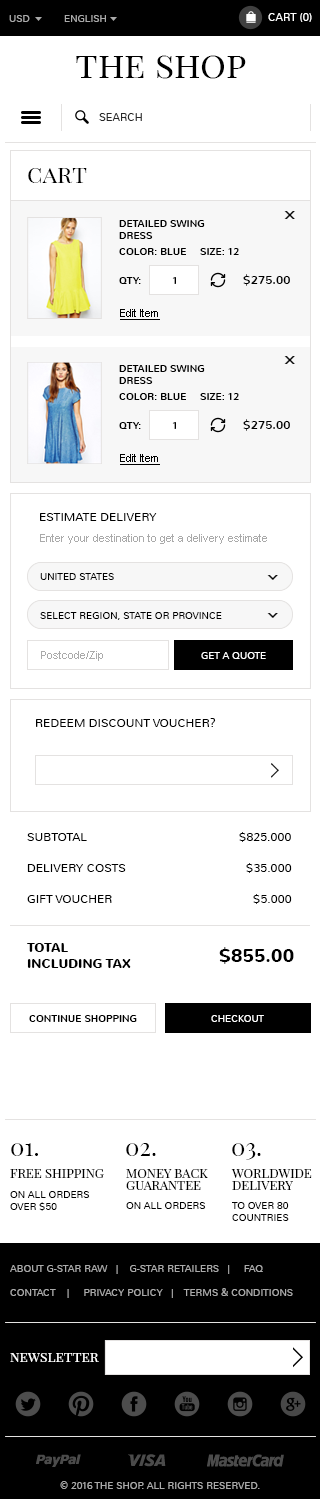
<style>
.page{position:relative;width:320px;height:1499px;background:#ffffff}
.page>*{position:absolute;margin:0}
.t1{font:10px "Nunito-Light";color:#aaaaaa;text-transform:uppercase}
.t2{font:11px "Nunito-Light";color:#ffffff;text-transform:uppercase}
.t3{font:36px "PlayfairDisplaySC-Regular";color:#000000}
.t4{font:11px "Nunito-Light";color:#282828;text-transform:uppercase}
.t5{font:24px "PlayfairDisplaySC-Regular";color:#000000}
.t6{font:10px/12px "Nunito-Regular";color:#000000;text-transform:uppercase}
.t7{font:10px "Nunito-Regular";color:#000000;text-transform:uppercase}
.t8{font:10px "Nunito-Regular";color:#000000}
.t9{font:12px "Nunito-Regular";color:#000000;text-transform:uppercase}
.t10{font:11px "ArialMT";color:#000000;text-decoration:underline}
.t11{font:12px "Nunito-Light";color:#000000;text-transform:uppercase}
.t12{font:11px "ArialMT";color:#aaaaaa}
.t13{font:10px "Nunito-Light";color:#000000;text-transform:uppercase}
.t14{font:10px "Nunito-Light";color:#ffffff;text-transform:uppercase}
.t15{font:13px "Nunito-Bold";color:#000000;text-transform:uppercase}
.t16{font:18px "Nunito-Bold";color:#000000;text-transform:uppercase}
.t17{font:13px "PlayfairDisplaySC-Regular";color:#000000;text-transform:uppercase}
.t18{font:13px/12px "PlayfairDisplaySC-Regular";color:#000000;text-transform:uppercase}
.t19{font:10px/24px "Nunito-Light";color:#aaaaaa;text-transform:uppercase}
.t20{font:14px "PlayfairDisplaySC-Regular";color:#ffffff}
</style>
<div class="page">
<p class="t1" style="left:9px;top:15px;width:21px;height:7px">usD</p>
<p class="t1" style="left:64px;top:15px;width:42px;height:7px">English</p>
<p class="t2" style="left:268px;top:13px;width:44px;height:9px">Cart (0)</p>
<p class="t3" style="left:76px;top:55px;width:170px;height:24px">the shop</p>
<p class="t4" style="left:99px;top:113px;width:43px;height:8px">search</p>
<p class="t5" style="left:28px;top:168px;width:59px;height:15px">cart</p>
<p class="t6" style="left:119px;top:220px;width:86px;height:19px">detailed swing<br>dress</p>
<p class="t7" style="left:119px;top:248px;width:67px;height:7px">color: blue</p>
<p class="t7" style="left:200px;top:248px;width:39px;height:7px">size: 12</p>
<p class="t7" style="left:119px;top:277px;width:22px;height:7px">qty:</p>
<p class="t8" style="left:172px;top:277px;width:4px;height:7px">1</p>
<p class="t9" style="left:243px;top:274px;width:47px;height:12px">$275.00</p>
<p class="t10" style="left:120px;top:309px;width:40px;height:11px">Edit Item</p>
<p class="t6" style="left:119px;top:365px;width:86px;height:19px">detailed swing<br>dress</p>
<p class="t7" style="left:119px;top:393px;width:67px;height:7px">color: blue</p>
<p class="t7" style="left:200px;top:393px;width:39px;height:7px">size: 12</p>
<p class="t7" style="left:119px;top:422px;width:22px;height:7px">qty:</p>
<p class="t8" style="left:172px;top:422px;width:4px;height:7px">1</p>
<p class="t9" style="left:243px;top:419px;width:47px;height:12px">$275.00</p>
<p class="t10" style="left:120px;top:454px;width:40px;height:11px">Edit Item</p>
<p class="t11" style="left:40px;top:513px;width:117px;height:8px">estimate Delivery</p>
<p class="t12" style="left:40px;top:534px;width:227px;height:10px">Enter your destination to get a delivery estimate</p>
<p class="t13" style="left:40px;top:573px;width:74px;height:7px">united states</p>
<p class="t13" style="left:40px;top:612px;width:182px;height:8px">select region, state or province</p>
<p class="t12" style="left:41px;top:651px;width:62px;height:10px">Postcode/Zip</p>
<p class="t14" style="left:201px;top:652px;width:65px;height:7px">get a quote</p>
<p class="t11" style="left:36px;top:718px;width:180px;height:9px">redeem discount voucher?</p>
<p class="t11" style="left:27px;top:833px;width:60px;height:8px">subtotal</p>
<p class="t11" style="left:239px;top:832px;width:52px;height:10px">$825.000</p>
<p class="t11" style="left:27px;top:864px;width:99px;height:8px">delivery costs</p>
<p class="t11" style="left:246px;top:863px;width:46px;height:10px">$35.000</p>
<p class="t11" style="left:253px;top:894px;width:39px;height:10px">$5.000</p>
<p class="t11" style="left:27px;top:895px;width:85px;height:8px">gift voucher</p>
<p class="t15" style="left:27px;top:943px;width:104px;height:25px">total<br>including tax</p>
<p class="t16" style="left:219px;top:947px;width:75px;height:17px">$855.00</p>
<p class="t7" style="left:29px;top:1015px;width:108px;height:7px">continue shopping</p>
<p class="t14" style="left:211px;top:1015px;width:53px;height:7px">checkout</p>
<p class="t5" style="left:11px;top:1143px;width:27px;height:13px">01.</p>
<p class="t5" style="left:126px;top:1143px;width:30px;height:13px">02.</p>
<p class="t5" style="left:232px;top:1143px;width:29px;height:17px">03.</p>
<p class="t17" style="left:10px;top:1169px;width:94px;height:9px">Free Shipping</p>
<p class="t18" style="left:126px;top:1169px;width:82px;height:21px">Money back<br>guarantee</p>
<p class="t18" style="left:231px;top:1169px;width:81px;height:21px">Worldwide<br>Delivery</p>
<p class="t13" style="left:10px;top:1191px;width:80px;height:20px">On all orders<br>over $50</p>
<p class="t13" style="left:126px;top:1202px;width:80px;height:7px">On all orders</p>
<p class="t13" style="left:232px;top:1202px;width:57px;height:19px">To over 80<br>countries</p>
<p class="t19" style="left:10px;top:1265px;width:283px;height:33px">About G-Star Raw   |    G-Star Retailers   |     FAQ<br>Contact    |     Privacy Policy   |    Terms &amp; Conditions</p>
<p class="t20" style="left:10px;top:1353px;width:89px;height:9px">newsletter</p>
<p class="t1" style="left:60px;top:1481px;width:200px;height:8px">© 2016 the shop. All Rights Reserved.</p>
</div>
